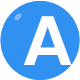
<style>
.page{position:relative;width:80px;height:80px;background:#3191f1}
.page>*{position:absolute;margin:0}
.t1{font:70px "Poppins-SemiBold";color:#ffffff}
</style>
<div class="page">
<p class="t1" style="left:24px;top:16px;width:48px;height:49px">A</p>
</div>
